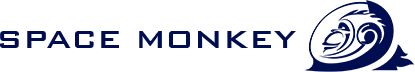
<style>
.page{position:relative;width:415px;height:72px;background:#ffffff}
.page>*{position:absolute;margin:0}
.t1{font:33px "BankGothicBT-Medium";color:#000d51}
</style>
<div class="page">
<p class="t1" style="left:0px;top:31px;width:296px;height:17px">SPACE MONKEY</p>
</div>
